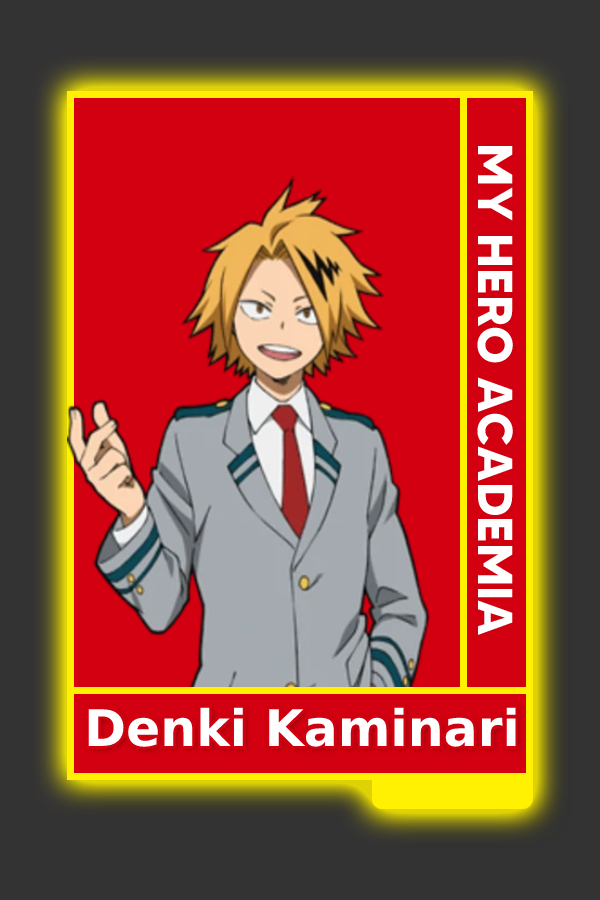
<style>
.page{position:relative;width:600px;height:900px;background:#d20010}
.page>*{position:absolute;margin:0}
.t1{font:48.8px "MADETOMMY-Bold";color:#ffffff}
.t2{font:50.5px "MADETOMMY-Bold";color:#ffffff}
</style>
<div class="page">
<p class="t1" style="left:477px;top:146px;width:36px;height:489px;rotate:90deg">MY HERO ACADEMIA</p>
<p class="t2" style="left:88px;top:707px;width:428px;height:40px">Denki Kaminari</p>
</div>
